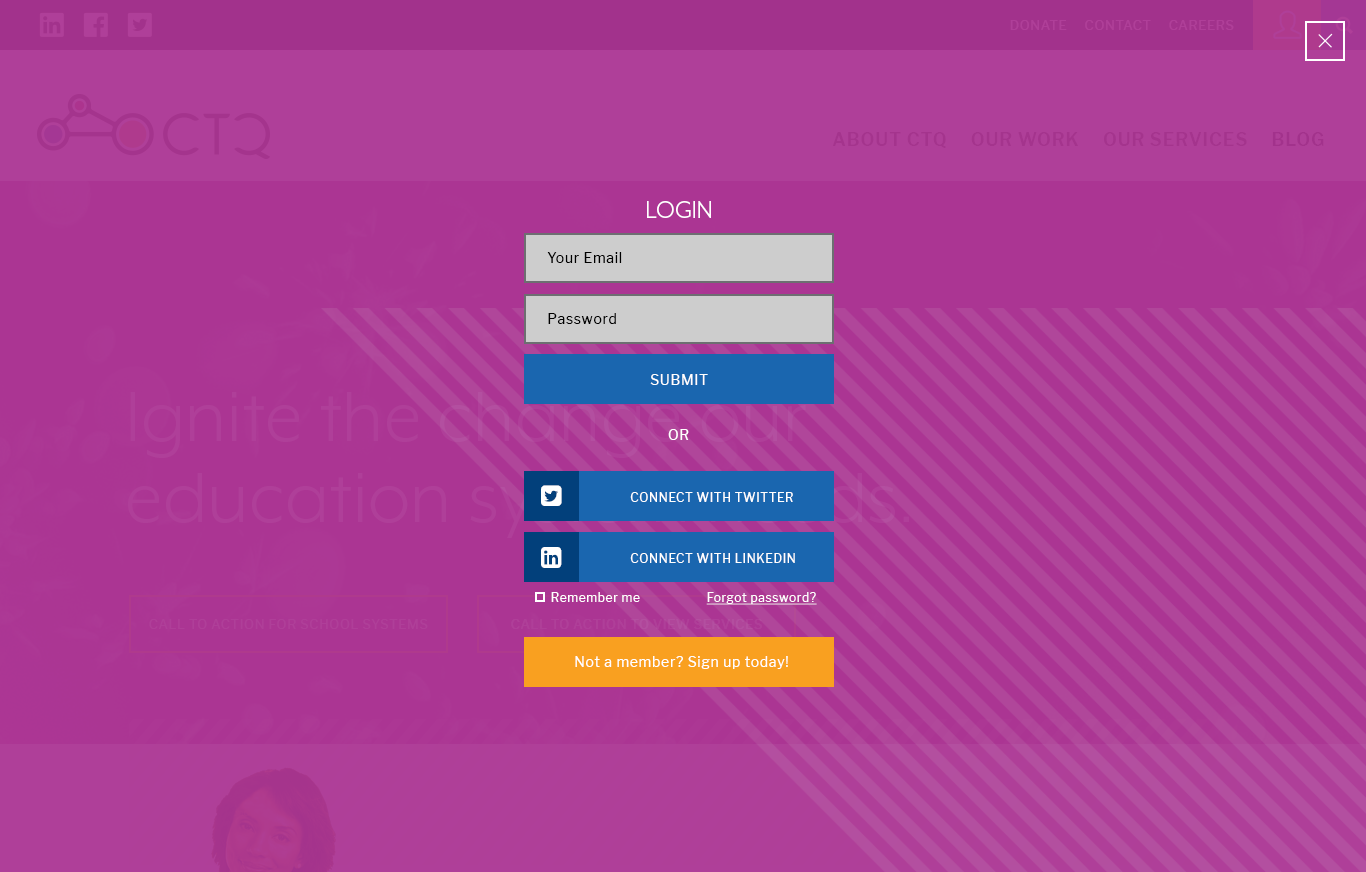
<style>
.page{position:relative;width:1366px;height:872px;background:#ab3593}
.page>*{position:absolute;margin:0}
.t1{font:27px "MrEavesXLModOT-Book";letter-spacing:0.005em;color:#ffffff}
.t2{font:14px "LibreFranklin-Regular";letter-spacing:0.05em;color:#000000}
.t3{font:14px "LibreFranklin-Regular";letter-spacing:0.05em;color:#ffffff}
.t4{font:12px "LibreFranklin-Regular";letter-spacing:0.05em;color:#ffffff;text-transform:uppercase}
.t5{font:12px "LibreFranklin-Regular";letter-spacing:0.05em;color:#ffffff}
.t6{font:12px "LibreFranklin-Regular";letter-spacing:0.05em;color:#ffffff;text-decoration:underline}
</style>
<div class="page">
<p class="t1" style="left:647px;top:201px;width:64px;height:17px">LOGIN</p>
<p class="t2" style="left:547px;top:252px;width:75px;height:11px">Your Email</p>
<p class="t2" style="left:548px;top:313px;width:68px;height:11px">Password</p>
<p class="t3" style="left:650px;top:374px;width:58px;height:11px">SUBMIT</p>
<p class="t3" style="left:668px;top:429px;width:21px;height:11px">OR</p>
<p class="t4" style="left:630px;top:492px;width:163px;height:10px">Connect with Twitter</p>
<p class="t4" style="left:630px;top:553px;width:165px;height:10px">Connect with Linkedin</p>
<p class="t5" style="left:551px;top:592px;width:89px;height:10px">Remember me</p>
<p class="t6" style="left:706px;top:592px;width:111px;height:13px">Forgot password?</p>
<p class="t3" style="left:575px;top:656px;width:213px;height:13px">Not a member? Sign up today!</p>
</div>
